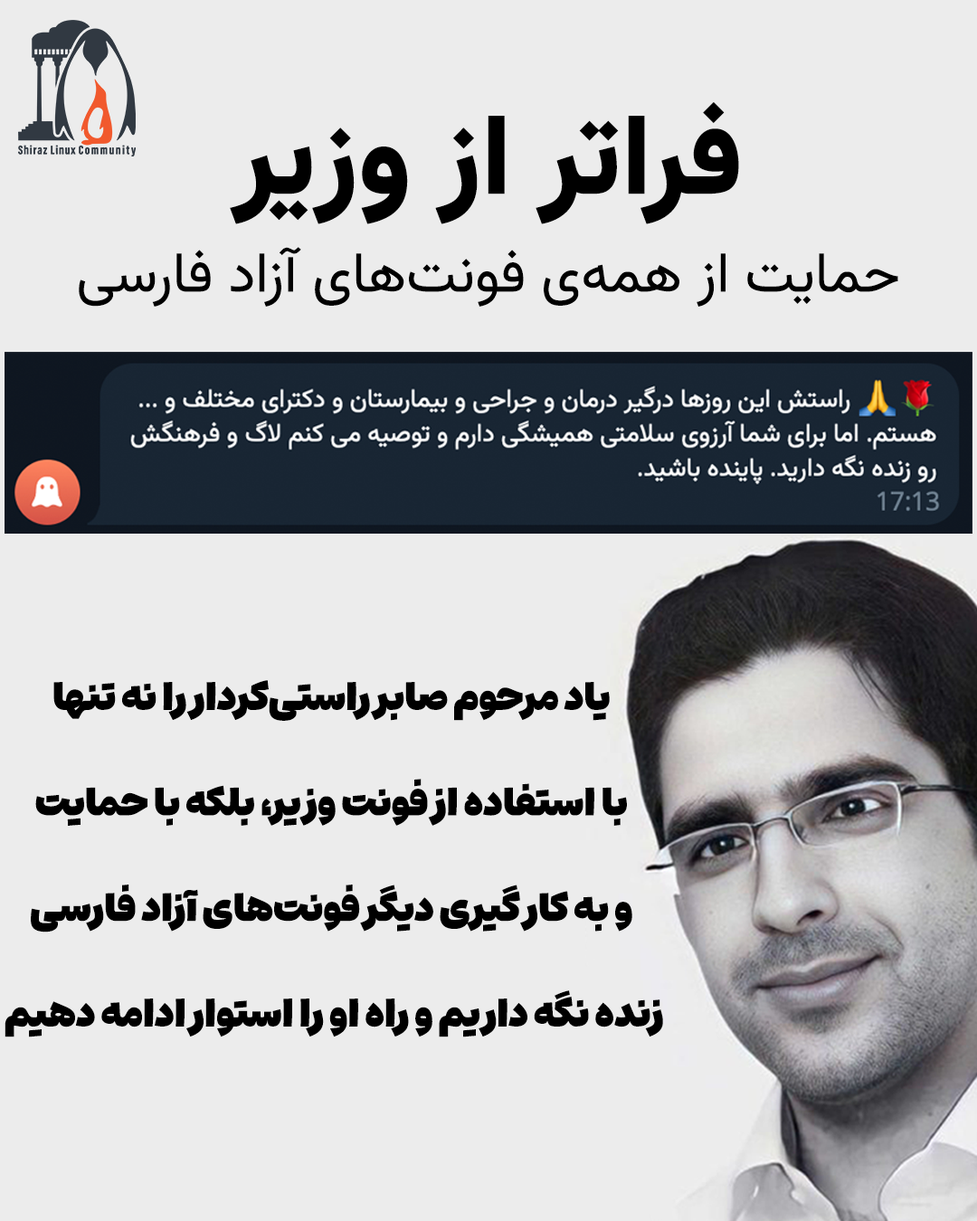
<style>
.page{position:relative;width:977px;height:1221px;background:#ececec}
.page>*{position:absolute;margin:0}
.t1{font:56.5px/98px "Vazirmatn-Regular";color:#000000}
.t2{font:113px "Vazirmatn-Black";color:#000000}
.t3{font:37.7px/105.5px "EstedadMad-Fat";color:#000000}
</style>
<div class="page">
<p class="t1" style="left:79px;top:102px;width:819px;height:205px;text-align:center"><span class="t2">فراتر از وزیر<br></span>حمایت از همه‌ی فونت‌های آزاد فارسی</p>
<p class="t3" style="left:5px;top:680px;width:658px;height:357px;text-align:center">یاد مرحوم صابر راستی‌کردار را نه تنها<br>با استفاده از فونت وزیر، بلکه با حمایت<br>و به کار گیری دیگر فونت‌های آزاد فارسی<br>زنده نگه داریم و راه او را استوار ادامه دهیم</p>
</div>
